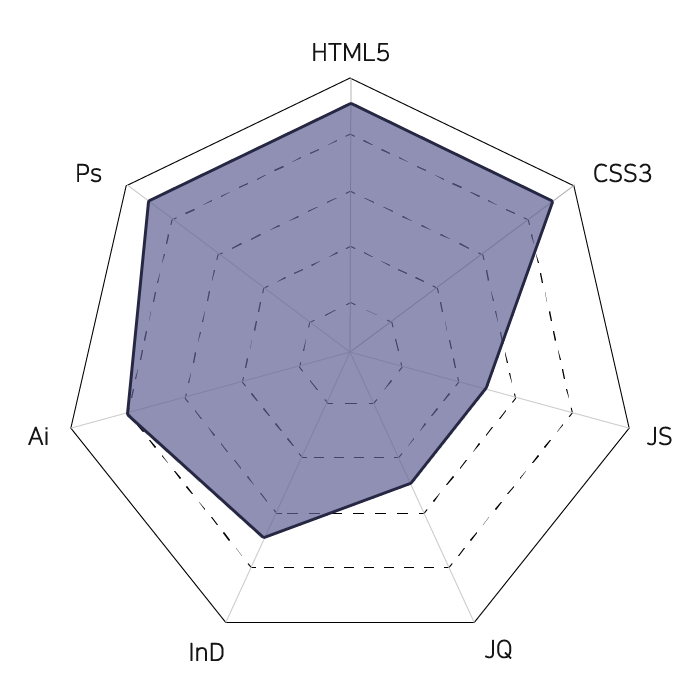
<style>
.page{position:relative;width:700px;height:700px;background:#ffffff}
.page>*{position:absolute;margin:0}
.t1{font:23.8px "NanumSquareL";color:#151515;font-weight:bold}
.t2{font:24px "NanumSquareL";color:#151515;font-weight:bold}
</style>
<div class="page">
<p class="t1" style="left:313px;top:43px;width:76px;height:19px">HTML5</p>
<p class="t2" style="left:77px;top:163px;width:25px;height:20px">Ps</p>
<p class="t2" style="left:594px;top:163px;width:58px;height:20px">CSS3</p>
<p class="t2" style="left:28px;top:426px;width:20px;height:19px">Ai</p>
<p class="t2" style="left:647px;top:426px;width:25px;height:20px">JS</p>
<p class="t2" style="left:485px;top:639px;width:27px;height:20px">JQ</p>
<p class="t2" style="left:190px;top:642px;width:34px;height:19px">InD</p>
</div>
